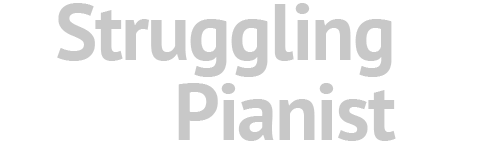
<style>
.page{position:relative;width:500px;height:150px;background:#ffffff}
.page>*{position:absolute;margin:0}
.t1{font:80px/80px "PTSans-Bold";letter-spacing:-0.025em;color:#c7c7c7}
</style>
<div class="page">
<p class="t1" style="left:57px;top:3px;width:339px;height:138px;text-align:right">Struggling<br>Pianist</p>
</div>
